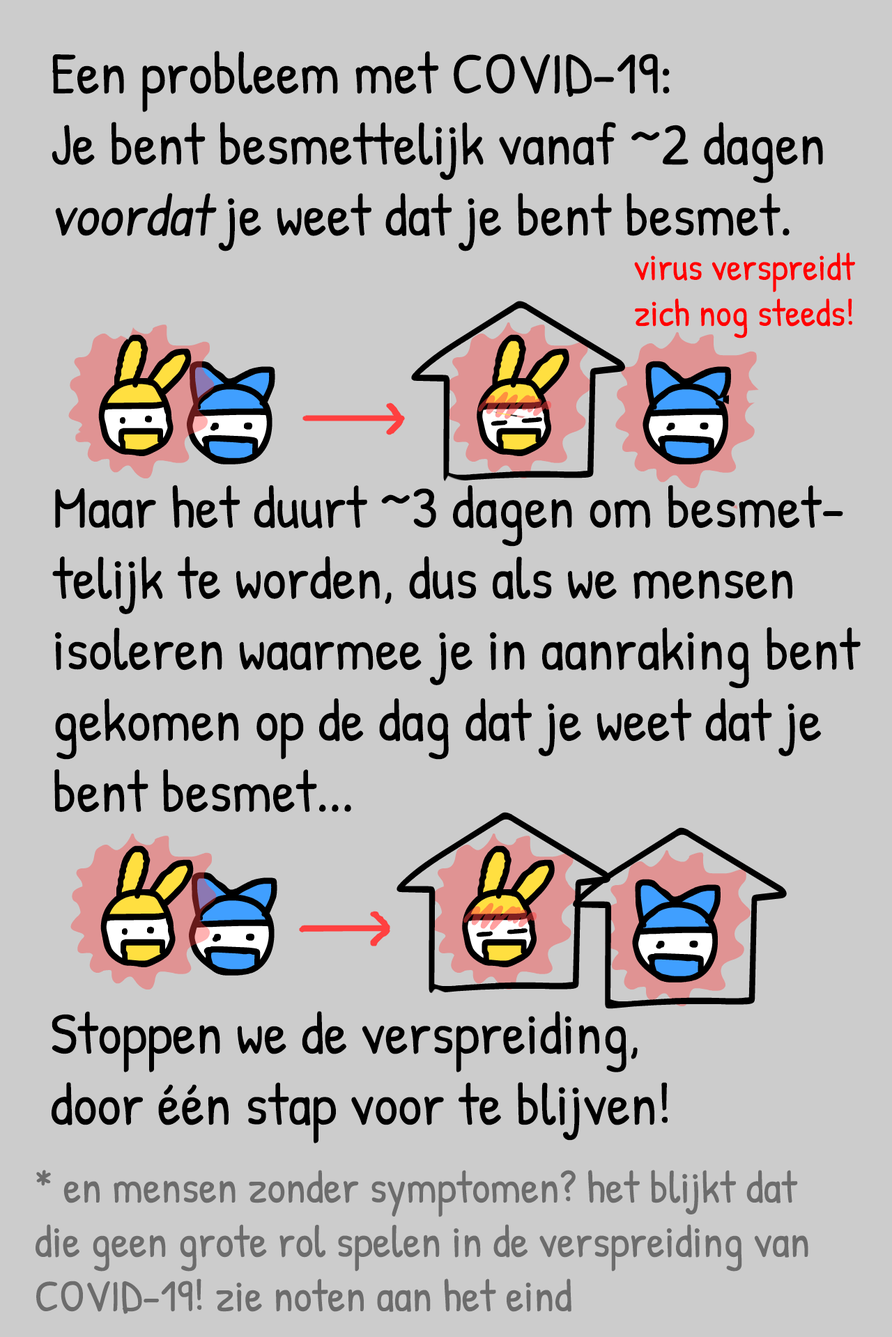
<style>
.page{position:relative;width:892px;height:1337px;background:#cccccc}
.page>*{position:absolute;margin:0}
.t1{font:59.2px "PatrickHand-Regular";color:#000000}
.t2{font:59.2px "PatrickHand-Regular";color:#000000;font-style:italic}
.t3{font:38.3px "PatrickHand-Regular";color:#ff0000}
.t4{font:45.3px "PatrickHand-Regular";color:#6c6c6c}
</style>
<div class="page">
<p class="t1" style="left:52px;top:51px;width:771px;height:200px">Een probleem met COVID-19:<br>Je bent besmettelijk vanaf ~2 dagen<br><span class="t2">voordat</span> je weet dat je bent besmet.</p>
<p class="t3" style="left:634px;top:252px;width:221px;height:87px">virus verspreidt<br>zich nog steeds!</p>
<p class="t1" style="left:52px;top:485px;width:808px;height:328px">Maar het duurt ~3 dagen om besmet-<br>telijk te worden, dus als we mensen<br>isoleren waarmee je in aanraking bent<br>gekomen op de dag dat je weet dat je<br>bent besmet...</p>
<p class="t1" style="left:51px;top:1011px;width:616px;height:133px">Stoppen we de verspreiding,<br>door één stap voor te blijven!</p>
<p class="t4" style="left:36px;top:1170px;width:772px;height:144px">* en mensen zonder symptomen? het blijkt dat<br>die geen grote rol spelen in de verspreiding van<br>COVID-19! zie noten aan het eind</p>
</div>
